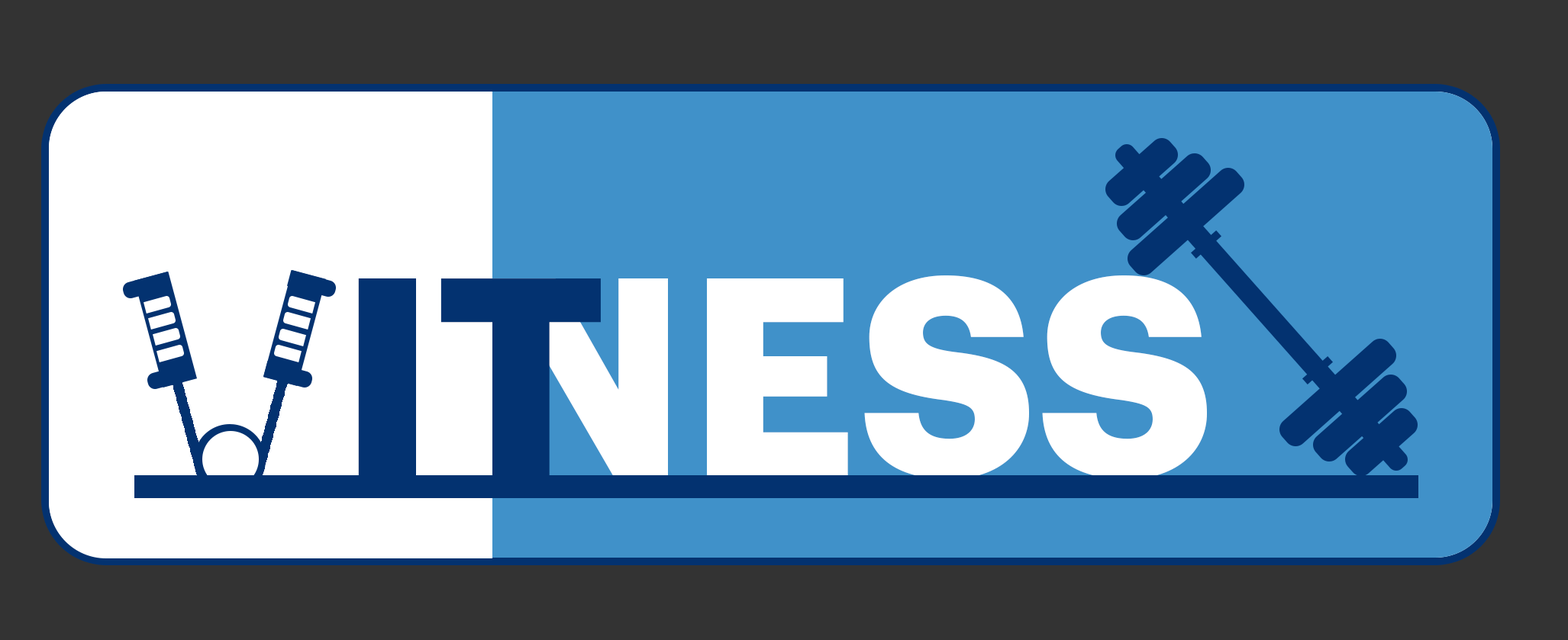
<style>
.page{position:relative;width:1568px;height:640px;background:#4091c9}
.page>*{position:absolute;margin:0}
.t1{font:277.1px "Graphik-Bold";color:#033270}
.t2{font:276.4px "Graphik-Bold";color:#ffffff}
</style>
<div class="page">
<p class="t1" style="left:358px;top:279px;width:243px;height:197px">IT</p>
<p class="t2" style="left:492px;top:276px;width:715px;height:203px">NESS</p>
</div>
